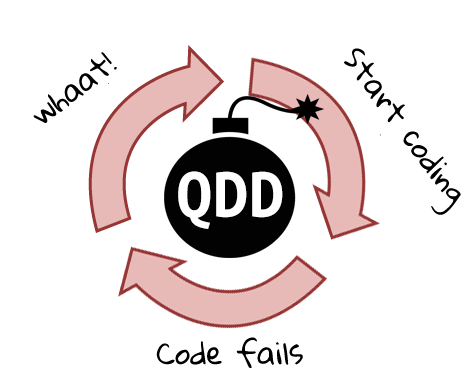
<style>
.page{position:relative;width:475px;height:372px;background:#ffffff}
.page>*{position:absolute;margin:0}
.t1{font:30px "GloriaHallelujah";color:#000000}
.t2{font:72px "UbuntuMonoDerivativePowerline-Bold";color:#ffffff}
</style>
<div class="page">
<p class="t1" style="left:33px;top:52px;width:84px;height:71px;rotate:-38deg">whaat!</p>
<p class="t1" style="left:344px;top:48px;width:117px;height:167px;rotate:53deg">Start coding</p>
<p class="t2" style="left:178px;top:171px;width:105px;height:58px">QDD</p>
<p class="t1" style="left:156px;top:337px;width:147px;height:31px">Code fails</p>
</div>
